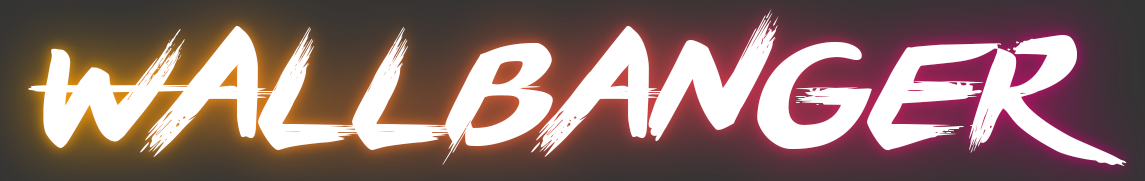
<style>
.page{position:relative;width:1145px;height:181px;background:#ffffff}
.page>*{position:absolute;margin:0}
.t1{font:202px "BRUSHSTRIKE";color:#ffffff}
</style>
<div class="page">
<p class="t1" style="left:28px;top:9px;width:1099px;height:157px">Wallbanger</p>
</div>
